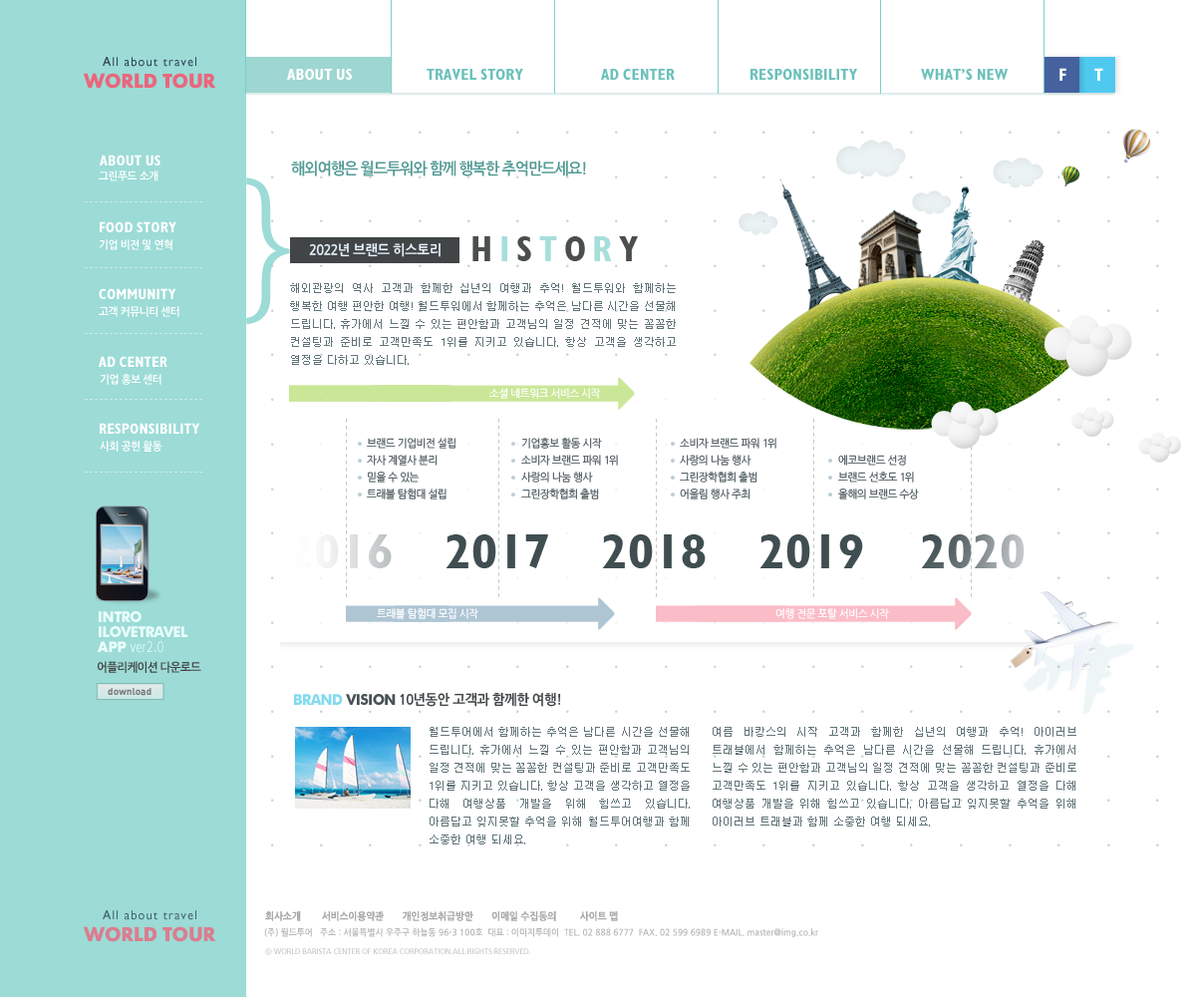
<style>
.page{position:relative;width:1196px;height:997px;background:#ffffff}
.page>*{position:absolute;margin:0}
.t1{font:13px "GillSansMT";letter-spacing:0.095em;color:#2d4056;scale:0.95 1}
.t2{font:19.9px "FuturaBQ-Bold";color:#f25973;scale:0.97 1}
.t3{font:15.9px "GillSans-CondensedBold";letter-spacing:0.005em;color:#ffffff;text-transform:uppercase}
.t4{font:15.9px "GillSans-CondensedBold";letter-spacing:0.005em;color:#6cc1ba;text-transform:uppercase}
.t5{font:17.9px "GillSans-CondensedBold";letter-spacing:0.005em;color:#ffffff;text-transform:uppercase}
.t6{font:15px "GillSans-CondensedBold";letter-spacing:0.005em;color:#ffffff;text-transform:uppercase}
.t7{font:15.9px "NanumGothicBold";letter-spacing:-0.05em;color:#539b95;scale:0.95 1}
.t8{font:11px "NanumGothicBold";letter-spacing:-0.03em;color:#ffffff;scale:0.95 1}
.t9{font:149.5px "RixGoL";letter-spacing:-0.04em;color:#9cdbd6}
.t10{font:14px "NanumGothicBold";letter-spacing:-0.06em;color:#e8f4ff;scale:0.95 1}
.t11{font:35.9px "GillSans-CondensedBold";letter-spacing:0.185em;color:#373b3c}
.t12{font:35.9px "GillSans-CondensedBold";letter-spacing:0.185em;color:#9cdbd6}
.t13{font:11px/17.9px "Dotum";color:#607377}
.t14{font:11px "NanumGothic";letter-spacing:-0.055em;color:#ffffff;scale:0.95 1}
.t15{font:11px/16.9px "NanumGothic";letter-spacing:-0.055em;color:#525e63;scale:0.95 1}
.t16{font:49.8px "GillSans-CondensedBold";letter-spacing:0.005em;color:#edeeef;text-transform:uppercase}
.t17{font:49.8px "GillSans-CondensedBold";letter-spacing:0.005em;color:#404e52;text-transform:uppercase}
.t18{font:49.8px "GillSans-CondensedBold";letter-spacing:0.005em;text-transform:uppercase}
.t19{font:15px/15px "FuturaBT-Bold";letter-spacing:-0.045em;color:#eafffd;text-transform:uppercase;scale:0.96 1}
.t20{font:15px/15px "FuturaBT-Bold";letter-spacing:-0.045em;color:#eafffd;scale:0.96 1}
.t21{font:15px/15px "FuturaBQ-Bold";letter-spacing:0.01em;color:#eafffd;scale:0.97 1}
.t22{font:15px/15px "FrutigerLTStd-LightCn";letter-spacing:0.01em;color:#eafffd;scale:0.97 1}
.t23{font:12px "NanumGothicBold";letter-spacing:-0.05em;color:#484848;scale:0.95 1}
.t24{font:15px "FuturaBT-Bold";letter-spacing:-0.045em;color:#485155;text-transform:uppercase;scale:0.96 1}
.t25{font:15px "FuturaBT-Bold";letter-spacing:-0.045em;color:#82daef;text-transform:uppercase;scale:0.96 1}
.t26{font:14px "NanumGothicBold";letter-spacing:-0.06em;color:#404446;scale:0.95 1}
.t27{font:13px "GillSansMT";letter-spacing:0.095em;color:#435f70;scale:0.95 1}
.t28{font:10px "NanumGothicBold";letter-spacing:-0.03em;color:#929292;font-weight:bold;scale:0.95 1}
.t29{font:19.9px "FuturaBQ-Bold";color:#da7d8f;scale:0.97 1}
.t30{font:9px "NanumGothicBold";color:#b7b7b7;scale:0.95 1}
.t31{font:8px "Frutiger-Roman";letter-spacing:-0.015em;scale:0.94 1}
.t32{font:8px "YGO540";letter-spacing:-0.015em;scale:0.94 1}
</style>
<div class="page">
<p class="t1" style="left:103px;top:57px;width:93px;height:10px">All about travel</p>
<p class="t2" style="left:83px;top:73px;width:133px;height:16px;opacity:0.9">WORLD TOUR</p>
<p class="t3" style="left:287px;top:69px;width:65px;height:11px">ABOUT US</p>
<p class="t4" style="left:427px;top:69px;width:96px;height:11px">Travel Story</p>
<p class="t4" style="left:601px;top:69px;width:74px;height:11px">AD center</p>
<p class="t4" style="left:751px;top:69px;width:106px;height:11px">Responsibility</p>
<p class="t4" style="left:921px;top:69px;width:88px;height:11px">What’s new</p>
<p class="t5" style="left:1060px;top:68px;width:7px;height:13px">F</p>
<p class="t5" style="left:1095px;top:68px;width:9px;height:13px">T</p>
<p class="t6" style="left:100px;top:155px;width:60px;height:10px">about us</p>
<p class="t7" style="left:291px;top:160px;width:295px;height:16px">해외여행은 월드투워와 함께 행복한 추억만드세요!</p>
<p class="t8" style="left:99px;top:170px;width:59px;height:11px">그린푸드 소개</p>
<p class="t9" style="left:246px;top:177px;width:44px;height:148px;rotate:180deg">{</p>
<p class="t6" style="left:100px;top:221px;width:76px;height:11px">food story</p>
<p class="t8" style="left:99px;top:239px;width:73px;height:11px">기업 비전 및 연혁</p>
<p class="t10" style="left:309px;top:242px;width:132px;height:15px">2022년 브랜드 히스토리</p>
<p class="t11" style="left:473px;top:236px;width:165px;height:25px;opacity:0.9">H<span class="t12">I</span>S<span class="t12">T</span>O<span class="t12">R</span>Y</p>
<p class="t6" style="left:99px;top:288px;width:77px;height:11px">community</p>
<p class="t13" style="left:290px;top:283px;width:386px;height:82px;text-align:justify">해외관광의 역사 고객과 함께한 십년의 여행과 추억! 월드투워와 함께하는 행복한 여행 편안한 여행! 월드투워에서 함께하는 추억은 남다른 시간을 선물해 드립니다. 휴가에서 느낄 수 있는 편안함과 고객님의 일정 견적에 맞는 꼼꼼한 컨설팅과 준비로 고객만족도 1위를 지키고 있습니다. 항상 고객을 생각하고 열정을 다하고 있습니다.</p>
<p class="t8" style="left:99px;top:306px;width:80px;height:11px">고객 커뮤니티 센터</p>
<p class="t6" style="left:99px;top:356px;width:68px;height:11px">ad center</p>
<p class="t8" style="left:100px;top:374px;width:61px;height:11px">기업 홍보 센터</p>
<p class="t14" style="left:489px;top:388px;width:112px;height:11px">소셜 네트워크 서비스 시작</p>
<p class="t6" style="left:100px;top:423px;width:99px;height:11px">responsibility</p>
<p class="t15" style="left:367px;top:438px;width:89px;height:61px">브랜드 기업비전 설립<br>자사 계열사 분리<br>믿을 수 있는 <br>트래블 탐험대 설립</p>
<p class="t15" style="left:521px;top:438px;width:97px;height:61px">기업홍보 활동 시작<br>소비자 브랜드 파워 1위<br>사랑의 나눔 행사<br>그린장학협회 출범</p>
<p class="t15" style="left:680px;top:438px;width:97px;height:61px">소비자 브랜드 파워 1위<br>사랑의 나눔 행사<br>그린장학협회 출범<br>어울림 행사 주최</p>
<p class="t8" style="left:100px;top:441px;width:62px;height:11px">사회 공헌 활동</p>
<p class="t15" style="left:838px;top:455px;width:81px;height:44px">에코브랜드 선정<br>브랜드 선호도 1위<br>올해의 브랜드 수상</p>
<p class="t16" style="left:288px;top:534px;width:104px;height:34px">2016</p>
<p class="t17" style="left:446px;top:534px;width:102px;height:34px">2017</p>
<p class="t17" style="left:602px;top:534px;width:104px;height:34px">2018</p>
<p class="t17" style="left:760px;top:534px;width:103px;height:34px">2019</p>
<p class="t18" style="left:921px;top:534px;width:104px;height:34px">2020</p>
<p class="t19" style="left:97px;top:611px;width:91px;height:42px;text-align:justify"><span class="t20">INTRO<br></span>ILOVETRAVEL<br><span class="t21">APP </span><span class="t22">ver2.0</span></p>
<p class="t14" style="left:377px;top:608px;width:101px;height:11px">트래블 탐험대 모집 시작</p>
<p class="t14" style="left:776px;top:608px;width:113px;height:11px">여행 전문 포탈 서비스 시작</p>
<p class="t23" style="left:98px;top:661px;width:103px;height:12px">어플리케이션 다운로드</p>
<p class="t24" style="left:294px;top:694px;width:102px;height:11px"><span class="t25">BRAND</span> vision</p>
<p class="t26" style="left:400px;top:692px;width:161px;height:15px">10년동안 고객과 함께한 여행!</p>
<p class="t13" style="left:430px;top:727px;width:260px;height:117px;text-align:justify">월드투어에서 함께하는 추억은 남다른 시간을 선물해 드립니다. 휴가에서 느낄 수 있는 편안함과 고객님의 일정 견적에 맞는 꼼꼼한 컨설팅과 준비로 고객만족도 1위를 지키고 있습니다. 항상 고객을 생각하고 열정을 다해 여행상품 개발을 위해 힘쓰고 있습니다. 아름답고 잊지못할 추억을 위해 월드투어여행과 함께 소중한 여행 되세요.</p>
<p class="t13" style="left:713px;top:727px;width:364px;height:99px;text-align:justify">여름 바캉스의 시작 고객과 함께한 십년의 여행과 추억! 아이러브 트래블에서 함께하는 추억은 남다른 시간을 선물해 드립니다. 휴가에서 느낄 수 있는 편안함과 고객님의 일정 견적에 맞는 꼼꼼한 컨설팅과 준비로 고객만족도 1위를 지키고 있습니다. 항상 고객을 생각하고 열정을 다해 여행상품 개발을 위해 힘쓰고 있습니다. 아름답고 잊지못할 추억을 위해 아이러브 트래블과 함께 소중한 여행 되세요.</p>
<p class="t27" style="left:103px;top:910px;width:93px;height:10px">All about travel</p>
<p class="t28" style="left:265px;top:911px;width:353px;height:10px">회사소개        서비스이용약관       개인정보취급방안       이메일 수집동의         사이트 맵</p>
<p class="t29" style="left:83px;top:926px;width:133px;height:16px">WORLD TOUR</p>
<p class="t30" style="left:264px;top:927px;width:554px;height:10px">(주) 월드투어   주소 : 서울특별시 우주구 하늘동 96-3 100호  대표 : 이미지투데이  TEL. 02 888 6777  FAX. 02 599 6989 E-MAIL. master@img.co.kr</p>
<p class="t31" style="left:265px;top:948px;width:265px;height:7px"><span class="t32">ⓒ</span> WORLD BARISTA CENTER OF KOREA CORPORATION.ALL RIGHTS RESERVED.</p>
</div>
